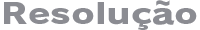
<style>
.page{position:relative;width:200px;height:30px;background:#ffffff}
.page>*{position:absolute;margin:0}
.t1{font:28.3px "RodinPro-EB";letter-spacing:0.001em;color:#8b8c92;scale:1.27 1}
</style>
<div class="page">
<p class="t1" style="left:4px;top:0px;width:193px;height:30px">Resolução</p>
</div>
